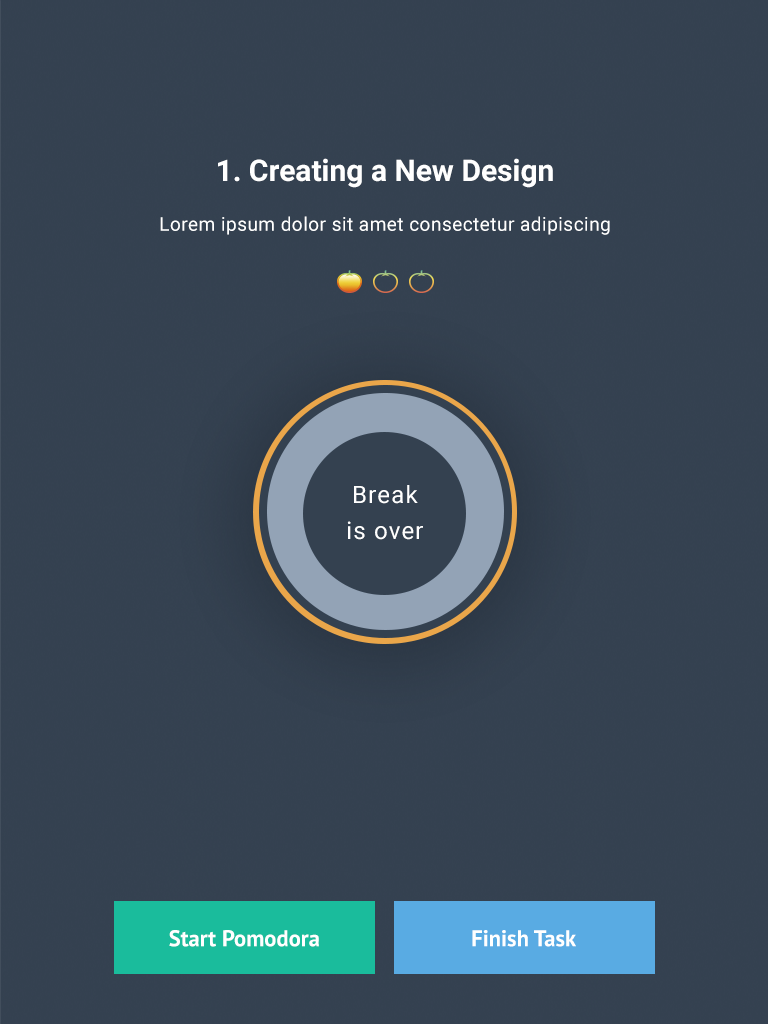
<style>
.page{position:relative;width:768px;height:1024px;background:#344150}
.page>*{position:absolute;margin:0}
.t1{font:30px "Roboto-Bold";color:#ffffff}
.t2{font:19px "Roboto-Regular";letter-spacing:0.025em;color:#ffffff}
.t3{font:24px/36px "Roboto-Regular";letter-spacing:0.05em;color:#ffffff}
.t4{font:22.6px "PTSans-Bold";color:#ffffff}
</style>
<div class="page">
<p class="t1" style="left:218px;top:158px;width:335px;height:30px">1. Creating a New Design</p>
<p class="t2" style="left:160px;top:216px;width:450px;height:19px">Lorem ipsum dolor sit amet consectetur adipiscing</p>
<p class="t3" style="left:347px;top:485px;width:76px;height:55px;text-align:center">Break is over</p>
<p class="t4" style="left:169px;top:930px;width:150px;height:17px">Start Pomodora</p>
<p class="t4" style="left:472px;top:930px;width:104px;height:17px">Finish Task</p>
</div>
